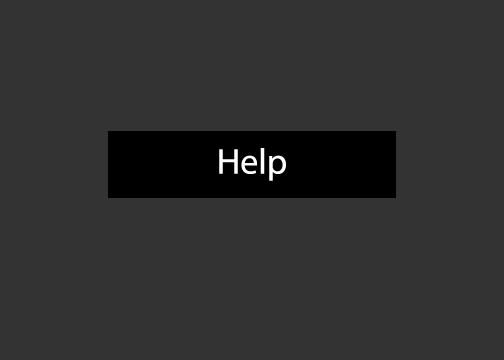
<style>
.page{position:relative;width:504px;height:360px;background:#333333}
.page>*{position:absolute;margin:0}
.t1{font:36px "MyriadPro-Regular";color:#ffffff}
</style>
<div class="page">
<p class="t1" style="left:219px;top:148px;width:67px;height:33px">Help</p>
</div>
